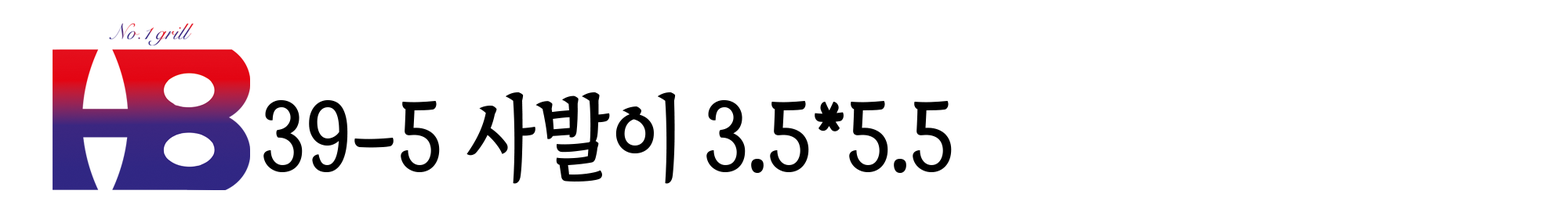
<style>
.page{position:relative;width:1568px;height:205px;background:#ffffff}
.page>*{position:absolute;margin:0}
.t1{font:93.7px "TheIndependenceHallofKorea-Regular";color:#000000;scale:0.89 1}
</style>
<div class="page">
<p class="t1" style="left:263px;top:93px;width:689px;height:91px">39-5 사발이 3.5*5.5</p>
</div>
